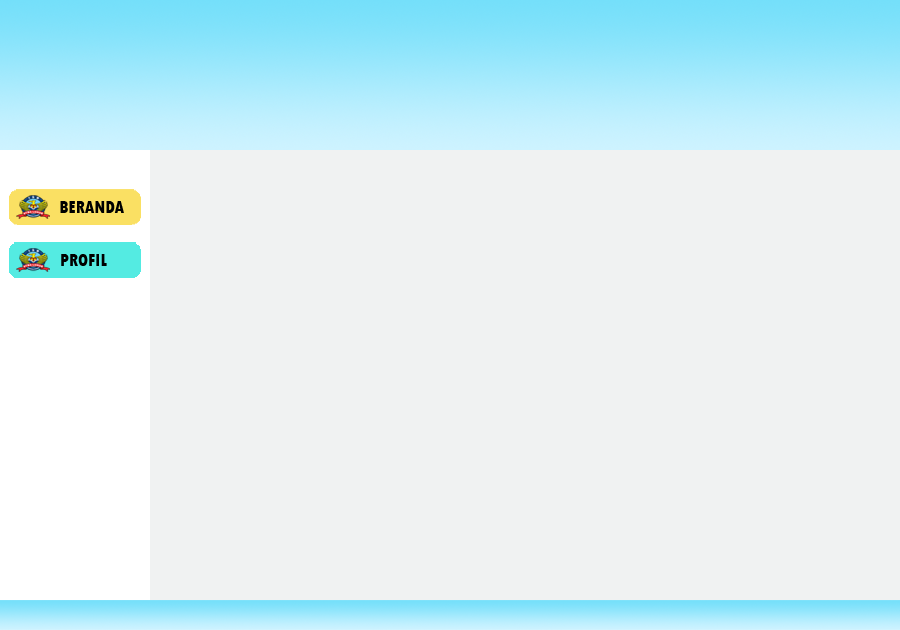
<style>
.page{position:relative;width:900px;height:630px;background:#f0f2f2}
.page>*{position:absolute;margin:0}
.t1{font:17.8px "TwCenMT-CondensedExtraBold";color:#000000}
</style>
<div class="page">
<p class="t1" style="left:60px;top:201px;width:64px;height:12px">BERANDA</p>
<p class="t1" style="left:61px;top:254px;width:46px;height:12px">PROFIL</p>
</div>
